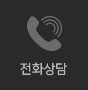
<style>
.page{position:relative;width:88px;height:90px;background:#292b2a}
.page>*{position:absolute;margin:0}
.t1{font:13px "NanumSquareR";color:#c7c7c7}
</style>
<div class="page">
<p class="t1" style="left:20px;top:62px;width:47px;height:14px">전화상담</p>
</div>
